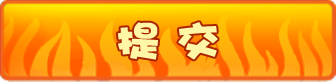
<style>
.page{position:relative;width:336px;height:82px}
.page>*{position:absolute;margin:0}
.t1{font:41.4px "DFPHaiBaoW12";letter-spacing:0.3em;color:#fff7a6;scale:1.11 1}
</style>
<div class="page">
<p class="t1" style="left:117px;top:22px;width:101px;height:38px">提交</p>
</div>
